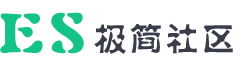
<style>
.page{position:relative;width:240px;height:60px;background:#ffffff}
.page>*{position:absolute;margin:0}
.t1{font:56px "FZSHHFW--GB1-0";letter-spacing:0.12em;color:#15c288}
.t2{font:32px "FZSHHJW--GB1-0";letter-spacing:0.12em;color:#393d49}
</style>
<div class="page">
<p class="t1" style="left:0px;top:12px;width:84px;height:42px">ES</p>
<p class="t2" style="left:94px;top:23px;width:139px;height:31px">极简社区</p>
</div>
